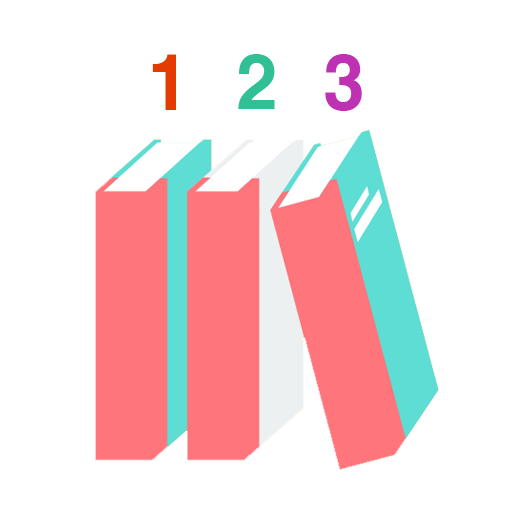
<style>
.page{position:relative;width:512px;height:512px;background:#ffffff}
.page>*{position:absolute;margin:0}
.t1{font:72px "H2gtrE";color:#e33b00}
.t2{font:72px "H2gtrE";color:#31bf95}
.t3{font:72px "H2gtrE";color:#bf31b3}
</style>
<div class="page">
<p class="t1" style="left:152px;top:54px;width:24px;height:56px">1</p>
<p class="t2" style="left:238px;top:54px;width:37px;height:55px">2</p>
<p class="t3" style="left:325px;top:54px;width:37px;height:57px">3</p>
</div>
